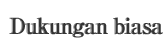
<style>
.page{position:relative;width:167px;height:49px;background:#ffffff}
.page>*{position:absolute;margin:0}
.t1{font:22px "RyuminPro-ExBold";letter-spacing:-0.08em;color:#343434;font-weight:bold}
</style>
<div class="page">
<p class="t1" style="left:9px;top:17px;width:154px;height:21px">Dukungan biasa</p>
</div>
